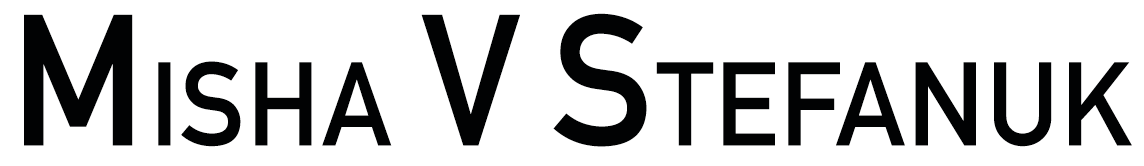
<style>
.page{position:relative;width:1144px;height:166px;background:#ffffff}
.page>*{position:absolute;margin:0}
.t1{font:116.7px "DINAlternate-Bold";color:#010203;text-transform:uppercase}
.t2{font:183.3px "DINAlternate-Bold";color:#010203;text-transform:uppercase}
</style>
<div class="page">
<p class="t1" style="left:24px;top:13px;width:1108px;height:134px"><span class="t2">M</span>isha <span class="t2">V S</span>tefanuk</p>
</div>
